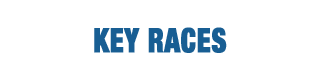
<style>
.page{position:relative;width:320px;height:80px;background:#ffffff}
.page>*{position:absolute;margin:0}
.t1{font:33.6px "HelveticaNeueLTStd-BlkCn";color:#185e93;text-transform:uppercase;font-weight:bold;scale:0.83 1}
</style>
<div class="page">
<p class="t1" style="left:94px;top:27px;width:133px;height:26px">key races</p>
</div>
